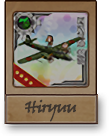
<style>
.page{position:relative;width:109px;height:136px}
.page>*{position:absolute;margin:0}
.t1{font:16px "VinerHandITC";letter-spacing:-0.08em;color:#3e3630;font-weight:bold}
</style>
<div class="page">
<p class="t1" style="left:25px;top:99px;width:52px;height:23px">Hiryuu</p>
</div>
